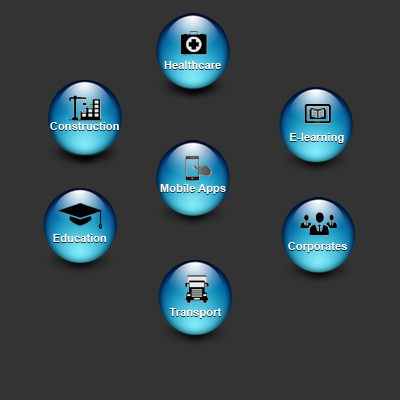
<style>
.page{position:relative;width:400px;height:400px;background:#333333}
.page>*{position:absolute;margin:0}
.t1{font:11.2px "Arial-BoldMT";color:#ffffff}
</style>
<div class="page">
<p class="t1" style="left:164px;top:61px;width:57px;height:8px">Healthcare</p>
<p class="t1" style="left:50px;top:122px;width:69px;height:8px">Construction</p>
<p class="t1" style="left:290px;top:133px;width:54px;height:10px">E-learning</p>
<p class="t1" style="left:160px;top:184px;width:66px;height:10px">Mobile Apps</p>
<p class="t1" style="left:53px;top:234px;width:54px;height:8px">Education</p>
<p class="t1" style="left:288px;top:242px;width:59px;height:10px">Corporates</p>
<p class="t1" style="left:169px;top:308px;width:53px;height:10px">Transport</p>
</div>
